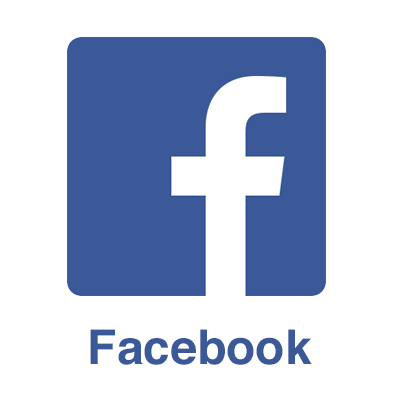
<style>
.page{position:relative;width:400px;height:400px;background:#ffffff}
.page>*{position:absolute;margin:0}
.t1{font:48px "Helvetica-Bold";color:#3b5999}
</style>
<div class="page">
<p class="t1" style="left:90px;top:329px;width:222px;height:36px">Facebook</p>
</div>
